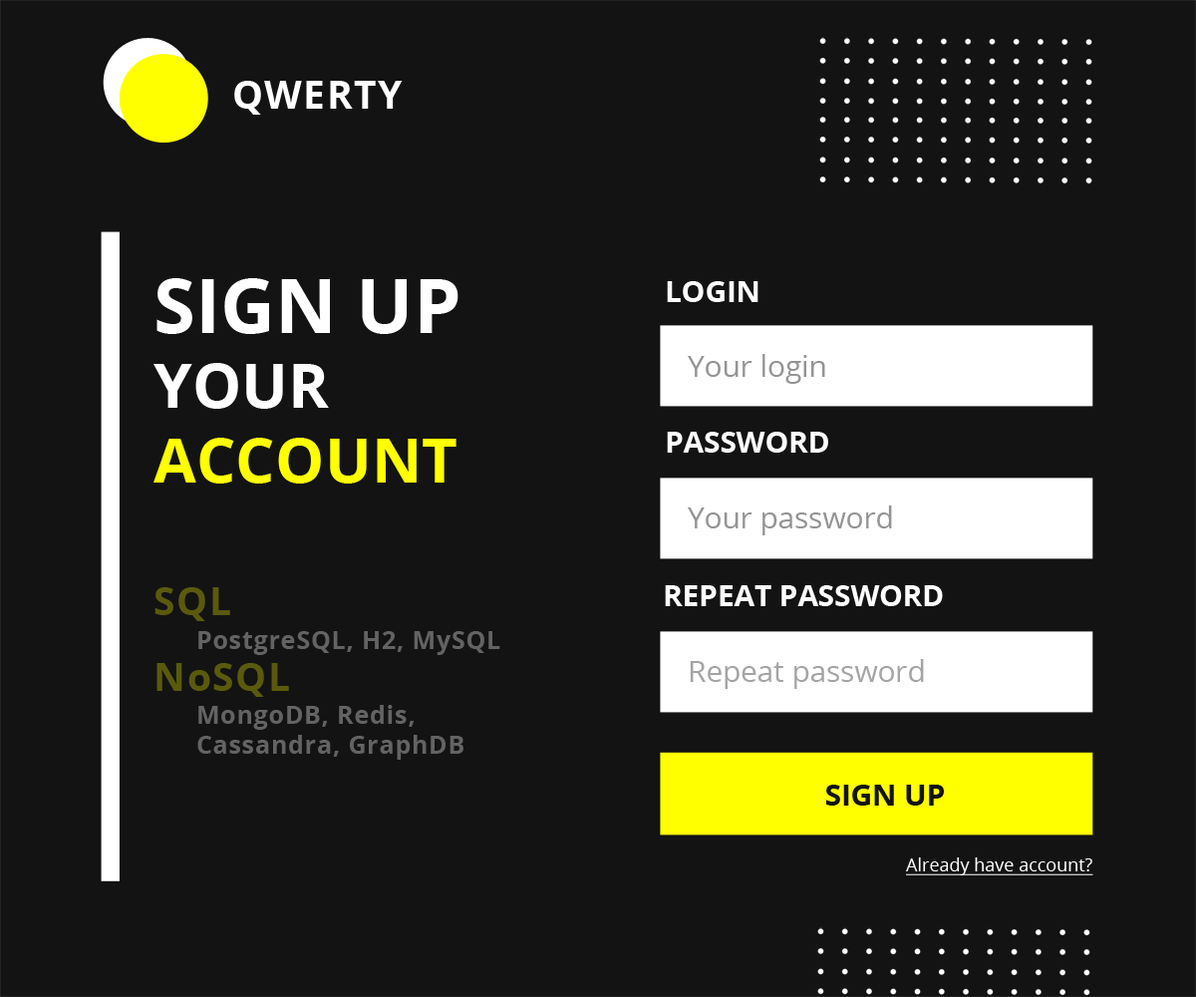
<style>
.page{position:relative;width:1196px;height:997px;background:#131313}
.page>*{position:absolute;margin:0}
.t1{font:38.7px "OpenSans-Bold";letter-spacing:0.04em;color:#ffffff}
.t2{font:75.8px "OpenSans-Bold";color:#ffffff;text-transform:uppercase}
.t3{font:62.1px "OpenSans-Bold";color:#ffffff;text-transform:uppercase}
.t4{font:62.1px "OpenSans-Bold";color:#ffff00;text-transform:uppercase}
.t5{font:29.5px "OpenSans-Bold";color:#fefeff;text-transform:uppercase}
.t6{font:29.5px "OpenSans-Regular";color:#949494}
.t7{font:38.7px "OpenSans-Bold";letter-spacing:0.04em;color:#5a5a0d}
.t8{font:29.5px "OpenSans-Bold";color:#ffffff;text-transform:uppercase}
.t9{font:24.6px "OpenSans-Bold";letter-spacing:0.04em;color:#636363}
.t10{font:29.5px "OpenSans-Regular";color:#a4a4a4}
.t11{font:29.5px "OpenSans-Bold";color:#131313;text-transform:uppercase}
.t12{font:17.9px "OpenSans-Regular";color:#ffffff;text-decoration:underline}
</style>
<div class="page">
<p class="t1" style="left:234px;top:81px;width:169px;height:34px">QWERTY</p>
<p class="t2" style="left:154px;top:278px;width:305px;height:205px">Sign UP<span class="t3"> <br>your<br></span><span class="t4">account</span></p>
<p class="t5" style="left:667px;top:281px;width:92px;height:21px">LOGIN</p>
<p class="t6" style="left:688px;top:354px;width:137px;height:30px">Your login</p>
<p class="t5" style="left:667px;top:432px;width:161px;height:21px">PASSWORD</p>
<p class="t6" style="left:688px;top:505px;width:204px;height:30px">Your password</p>
<p class="t7" style="left:155px;top:587px;width:75px;height:34px">SQL</p>
<p class="t8" style="left:665px;top:585px;width:278px;height:21px">Repeat password</p>
<p class="t9" style="left:198px;top:631px;width:302px;height:24px">PostgreSQL, H2, MySQL</p>
<p class="t7" style="left:157px;top:663px;width:132px;height:34px">NoSQL</p>
<p class="t10" style="left:690px;top:659px;width:234px;height:30px">Repeat password</p>
<p class="t9" style="left:197px;top:705px;width:267px;height:55px">MongoDB, Redis,<br>Cassandra, GraphDB</p>
<p class="t11" style="left:825px;top:785px;width:119px;height:20px">Sign UP</p>
<p class="t12" style="left:906px;top:857px;width:188px;height:18px">Already have account?</p>
</div>
